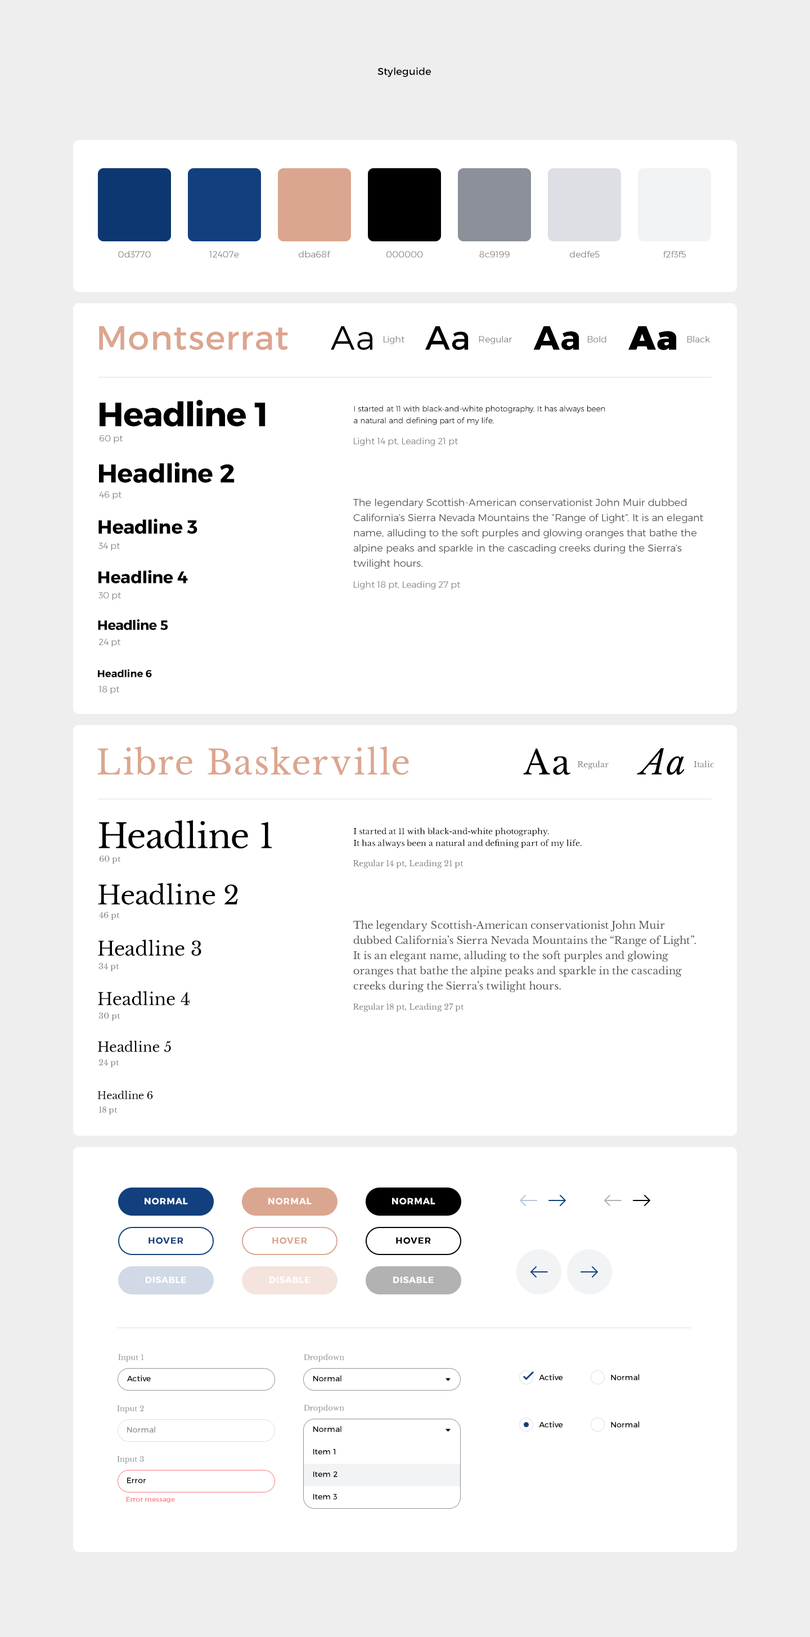
<style>
.page{position:relative;width:810px;height:1637px;background:#ffffff}
.page>*{position:absolute;margin:0}
.t1{font:10.1px "Montserrat-Regular";color:#000000}
.t2{font:9px "Montserrat-Light";color:#808080}
.t3{font:33.8px "Montserrat-Regular";letter-spacing:0.05em;color:#dba68f}
.t4{font:33.8px "Montserrat-Light";letter-spacing:0.05em;color:#000000}
.t5{font:33.8px "Montserrat-Regular";letter-spacing:0.05em;color:#000000}
.t6{font:33.8px "Montserrat-Bold";letter-spacing:0.05em;color:#000000}
.t7{font:33.8px "Montserrat-Black";letter-spacing:0.05em;color:#000000}
.t8{font:33.8px "Montserrat-Bold";color:#000000}
.t9{font:7.9px/11.8px "Montserrat-Light";color:#000000}
.t10{font:25.9px "Montserrat-Bold";color:#000000}
.t11{font:10.1px/15.2px "Montserrat-Light";color:#575757}
.t12{font:19.1px "Montserrat-Bold";color:#000000}
.t13{font:16.9px "Montserrat-Bold";color:#000000}
.t14{font:13.5px "Montserrat-Bold";color:#000000}
.t15{font:10.1px "Montserrat-Bold";color:#000000}
.t16{font:33.8px "LibreBaskerville-Regular";letter-spacing:0.05em;color:#dba68f}
.t17{font:33.8px "LibreBaskerville-Regular";letter-spacing:0.05em;color:#000000}
.t18{font:33.8px "LibreBaskerville-Italic";letter-spacing:0.05em;color:#000000}
.t19{font:7.9px "LibreBaskerville-Regular";color:#808080}
.t20{font:33.8px "LibreBaskerville-Regular";color:#000000}
.t21{font:7.9px/11.8px "LibreBaskerville-Regular";color:#000000}
.t22{font:25.9px "LibreBaskerville-Regular";color:#000000}
.t23{font:10.1px/15.2px "LibreBaskerville-Regular";color:#575757}
.t24{font:19.1px "LibreBaskerville-Regular";color:#000000}
.t25{font:16.9px "LibreBaskerville-Regular";color:#000000}
.t26{font:13.5px "LibreBaskerville-Regular";color:#000000}
.t27{font:10.1px "LibreBaskerville-Regular";color:#000000}
.t28{font:9px "Montserrat-Bold";letter-spacing:0.05em;color:#ffffff;text-transform:uppercase}
.t29{font:9px "Montserrat-Bold";letter-spacing:0.05em;color:#12407e;text-transform:uppercase}
.t30{font:9px "Montserrat-Bold";letter-spacing:0.05em;color:#dba68f;text-transform:uppercase}
.t31{font:9px "Montserrat-Bold";letter-spacing:0.05em;color:#000000;text-transform:uppercase}
.t32{font:7.3px "LibreBaskerville-Regular";color:#8c9199}
.t33{font:7.9px "Montserrat-Regular";color:#000000}
.t34{font:7.9px "Montserrat-Regular";color:#8c9199}
.t35{font:6.8px "Montserrat-Regular";color:#ff7481}
</style>
<div class="page">
<p class="t1" style="left:377px;top:67px;width:54px;height:10px">Styleguide</p>
<p class="t2" style="left:118px;top:251px;width:33px;height:7px">0d3770</p>
<p class="t2" style="left:209px;top:251px;width:30px;height:7px">12407e</p>
<p class="t2" style="left:299px;top:251px;width:32px;height:7px">dba68f</p>
<p class="t2" style="left:386px;top:251px;width:37px;height:7px">000000</p>
<p class="t2" style="left:479px;top:251px;width:31px;height:7px">8c9199</p>
<p class="t2" style="left:570px;top:251px;width:30px;height:7px">dedfe5</p>
<p class="t2" style="left:663px;top:251px;width:23px;height:7px">f2f3f5</p>
<p class="t3" style="left:99px;top:326px;width:189px;height:24px">Montserrat</p>
<p class="t4" style="left:331px;top:326px;width:41px;height:24px">Aa</p>
<p class="t5" style="left:425px;top:326px;width:44px;height:24px">Aa</p>
<p class="t6" style="left:533px;top:326px;width:46px;height:24px">Aa</p>
<p class="t7" style="left:628px;top:326px;width:49px;height:24px">Aa</p>
<p class="t2" style="left:384px;top:336px;width:20px;height:8px">Light</p>
<p class="t2" style="left:479px;top:336px;width:33px;height:8px">Regular</p>
<p class="t2" style="left:588px;top:336px;width:18px;height:7px">Bold</p>
<p class="t2" style="left:687px;top:336px;width:23px;height:7px">Black</p>
<p class="t8" style="left:100px;top:399px;width:166px;height:28px">Headline 1</p>
<p class="t9" style="left:354px;top:406px;width:251px;height:19px">I started at 11 with black-and-white photography. It has always been <br>a natural and defining part of my life.</p>
<p class="t2" style="left:100px;top:435px;width:23px;height:8px">60 pt</p>
<p class="t2" style="left:354px;top:438px;width:104px;height:8px">Light 14 pt, Leading 21 pt</p>
<p class="t10" style="left:99px;top:462px;width:136px;height:21px">Headline 2</p>
<p class="t2" style="left:99px;top:491px;width:23px;height:9px">46 pt</p>
<p class="t11" style="left:353px;top:498px;width:351px;height:71px">The legendary Scottish-American conservationist John Muir dubbed California’s Sierra Nevada Mountains the “Range of Light”. It is an elegant name, alluding to the soft purples and glowing oranges that bathe the alpine peaks and sparkle in the cascading creeks during the Sierra’s twilight hours.</p>
<p class="t12" style="left:98px;top:519px;width:99px;height:15px">Headline 3</p>
<p class="t2" style="left:98px;top:542px;width:22px;height:9px">34 pt</p>
<p class="t13" style="left:98px;top:570px;width:90px;height:13px">Headline 4</p>
<p class="t2" style="left:354px;top:581px;width:106px;height:9px">Light 18 pt, Leading 27 pt</p>
<p class="t2" style="left:98px;top:592px;width:23px;height:8px">30 pt</p>
<p class="t14" style="left:98px;top:619px;width:70px;height:11px">Headline 5</p>
<p class="t2" style="left:99px;top:638px;width:21px;height:9px">24 pt</p>
<p class="t15" style="left:98px;top:669px;width:54px;height:8px">Headline 6</p>
<p class="t2" style="left:98px;top:686px;width:21px;height:8px">18 pt</p>
<p class="t16" style="left:97px;top:746px;width:312px;height:29px">Libre Baskerville</p>
<p class="t17" style="left:523px;top:748px;width:47px;height:27px">Aa</p>
<p class="t18" style="left:637px;top:748px;width:48px;height:27px">Aa</p>
<p class="t19" style="left:578px;top:760px;width:31px;height:10px">Regular</p>
<p class="t19" style="left:694px;top:760px;width:20px;height:7px">Italic</p>
<p class="t20" style="left:98px;top:820px;width:174px;height:29px">Headline 1</p>
<p class="t21" style="left:354px;top:827px;width:228px;height:21px">I started at 11 with black-and-white photography. <br>It has always been a natural and defining part of my life.</p>
<p class="t19" style="left:100px;top:855px;width:21px;height:9px">60 pt</p>
<p class="t19" style="left:353px;top:860px;width:111px;height:8px">Regular 14 pt, Leading 21 pt</p>
<p class="t22" style="left:98px;top:883px;width:140px;height:21px">Headline 2</p>
<p class="t19" style="left:99px;top:911px;width:21px;height:9px">46 pt</p>
<p class="t23" style="left:353px;top:920px;width:343px;height:72px">The legendary Scottish-American conservationist John Muir dubbed California’s Sierra Nevada Mountains the “Range of Light”. It is an elegant name, alluding to the soft purples and glowing oranges that bathe the alpine peaks and sparkle in the cascading creeks during the Sierra’s twilight hours.</p>
<p class="t24" style="left:98px;top:939px;width:103px;height:17px">Headline 3</p>
<p class="t19" style="left:99px;top:962px;width:20px;height:9px">34 pt</p>
<p class="t25" style="left:98px;top:991px;width:92px;height:14px">Headline 4</p>
<p class="t19" style="left:99px;top:1012px;width:21px;height:9px">30 pt</p>
<p class="t19" style="left:353px;top:1003px;width:111px;height:9px">Regular 18 pt, Leading 27 pt</p>
<p class="t26" style="left:97px;top:1040px;width:74px;height:12px">Headline 5</p>
<p class="t19" style="left:99px;top:1059px;width:20px;height:9px">24 pt</p>
<p class="t27" style="left:97px;top:1090px;width:56px;height:9px">Headline 6</p>
<p class="t19" style="left:99px;top:1106px;width:19px;height:9px">18 pt</p>
<p class="t28" style="left:145px;top:1198px;width:43px;height:6px">Normal</p>
<p class="t28" style="left:268px;top:1198px;width:44px;height:6px">Normal</p>
<p class="t28" style="left:392px;top:1198px;width:43px;height:6px">Normal</p>
<p class="t29" style="left:148px;top:1237px;width:35px;height:7px">Hover</p>
<p class="t30" style="left:272px;top:1237px;width:35px;height:7px">Hover</p>
<p class="t31" style="left:396px;top:1237px;width:35px;height:7px">Hover</p>
<p class="t28" style="left:146px;top:1276px;width:40px;height:7px">Disable</p>
<p class="t28" style="left:269px;top:1276px;width:41px;height:7px">Disable</p>
<p class="t28" style="left:393px;top:1276px;width:41px;height:7px">Disable</p>
<p class="t32" style="left:118px;top:1354px;width:26px;height:8px">Input 1</p>
<p class="t32" style="left:304px;top:1353px;width:40px;height:9px">Dropdown</p>
<p class="t33" style="left:127px;top:1375px;width:24px;height:7px">Active</p>
<p class="t33" style="left:313px;top:1375px;width:28px;height:7px">Normal</p>
<p class="t33" style="left:539px;top:1374px;width:24px;height:6px">Active</p>
<p class="t33" style="left:611px;top:1374px;width:29px;height:6px">Normal</p>
<p class="t32" style="left:117px;top:1405px;width:27px;height:8px">Input 2</p>
<p class="t32" style="left:304px;top:1404px;width:40px;height:8px">Dropdown</p>
<p class="t33" style="left:539px;top:1421px;width:24px;height:7px">Active</p>
<p class="t33" style="left:611px;top:1421px;width:29px;height:7px">Normal</p>
<p class="t34" style="left:127px;top:1426px;width:28px;height:7px">Normal</p>
<p class="t33" style="left:313px;top:1426px;width:28px;height:6px">Normal</p>
<p class="t32" style="left:117px;top:1456px;width:27px;height:8px">Input 3</p>
<p class="t33" style="left:313px;top:1448px;width:22px;height:7px">Item 1</p>
<p class="t33" style="left:127px;top:1477px;width:19px;height:6px">Error</p>
<p class="t33" style="left:313px;top:1471px;width:25px;height:6px">Item 2</p>
<p class="t33" style="left:313px;top:1493px;width:24px;height:7px">Item 3</p>
<p class="t35" style="left:126px;top:1497px;width:49px;height:6px">Error message</p>
</div>
